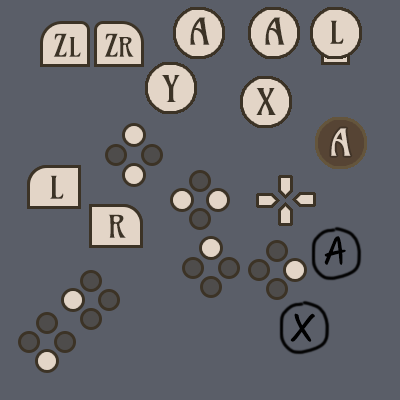
<style>
.page{position:relative;width:400px;height:400px;background:#5a5e68}
.page>*{position:absolute;margin:0}
.t1{font:36px "Amarante-Regular";color:#3c3326}
.t2{font:30px "Amarante-Regular";color:#3c3326}
.t3{font:26px "Amarante-Regular";color:#3c3326}
.t4{font:36px "Amarante-Regular";color:#e3d5c7}
.t5{font:40px "Kalam-Regular";color:#000000}
</style>
<div class="page">
<p class="t1" style="left:190px;top:17px;width:20px;height:28px">A</p>
<p class="t2" style="left:53px;top:33px;width:14px;height:24px">Z</p>
<p class="t3" style="left:69px;top:37px;width:12px;height:20px">L</p>
<p class="t2" style="left:104px;top:33px;width:14px;height:24px">Z</p>
<p class="t3" style="left:119px;top:37px;width:15px;height:20px">R</p>
<p class="t1" style="left:161px;top:75px;width:19px;height:27px">Y</p>
<p class="t1" style="left:256px;top:88px;width:20px;height:27px">X</p>
<p class="t4" style="left:331px;top:128px;width:20px;height:28px">A</p>
<p class="t2" style="left:50px;top:175px;width:14px;height:24px">L</p>
<p class="t2" style="left:50px;top:175px;width:14px;height:24px">L</p>
<p class="t2" style="left:108px;top:214px;width:18px;height:24px">R</p>
<p class="t2" style="left:108px;top:214px;width:18px;height:24px">R</p>
<p class="t5" style="left:324px;top:236px;width:22px;height:29px">A</p>
<p class="t5" style="left:290px;top:313px;width:25px;height:29px">X</p>
</div>
